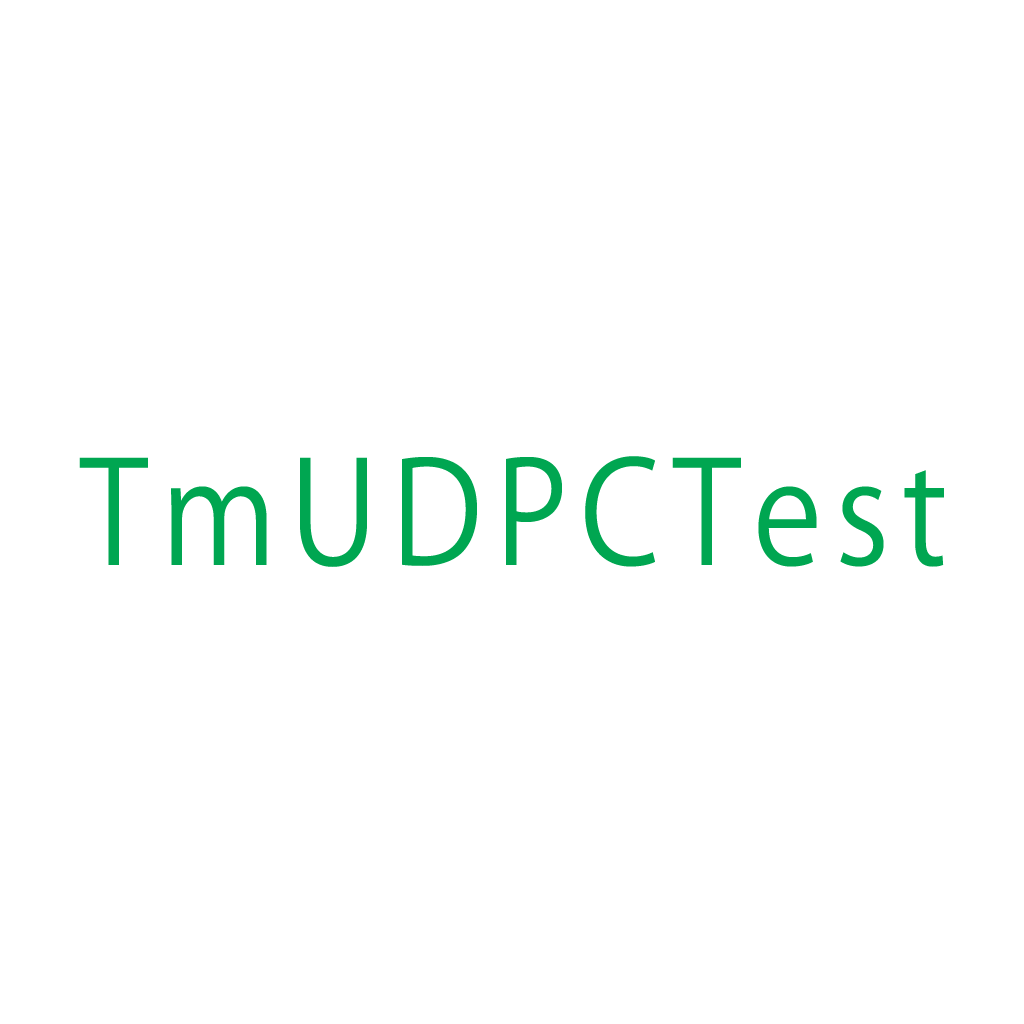
<style>
.page{position:relative;width:1024px;height:1024px;background:#ffffff}
.page>*{position:absolute;margin:0}
.t1{font:140.8px "KozGoPr6N-Regular";letter-spacing:0.1em;color:#00a651;scale:0.91 1}
</style>
<div class="page">
<p class="t1" style="left:79px;top:456px;width:865px;height:111px">TmUDPCTest</p>
</div>
